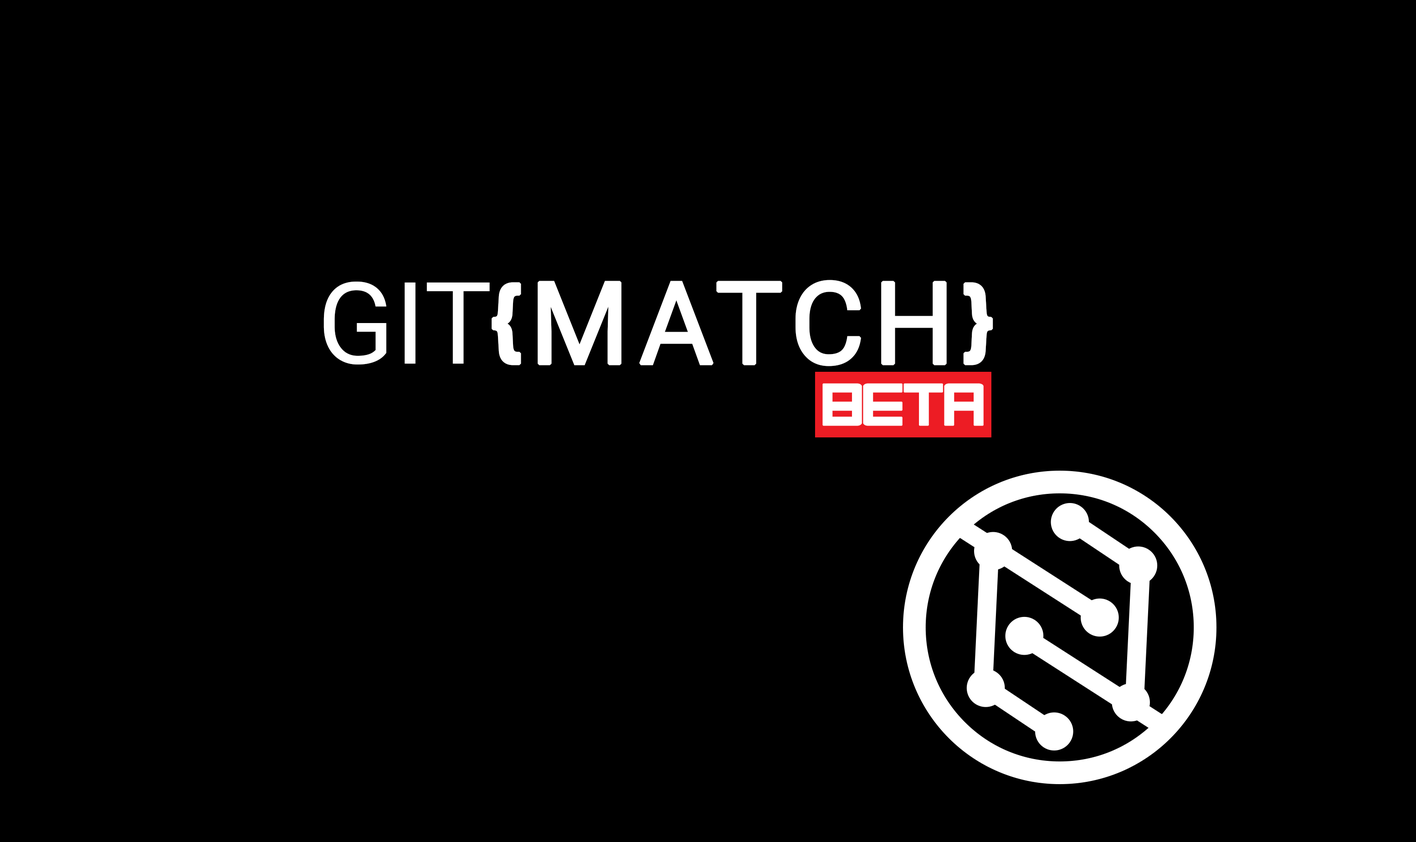
<style>
.page{position:relative;width:1416px;height:842px;background:#000000}
.page>*{position:absolute;margin:0}
.t1{font:113.9px "Roboto-Regular";letter-spacing:0.05em;color:#ffffff;text-transform:uppercase;font-weight:bold}
.t2{font:113.9px "Roboto-Regular";color:#ffffff}
.t3{font:113.9px "BebasNeue";letter-spacing:0.05em;color:#ffffff;font-weight:bold}
.t4{font:48.6px "Orena";letter-spacing:-0.025em;color:#ffffff;text-transform:uppercase;font-weight:bold}
</style>
<div class="page">
<p class="t1" style="left:324px;top:280px;width:669px;height:86px"><span class="t2">GIT</span><span class="t3">{</span>Match<span class="t3">}</span></p>
<p class="t4" style="left:822px;top:383px;width:162px;height:43px">BETA</p>
</div>
